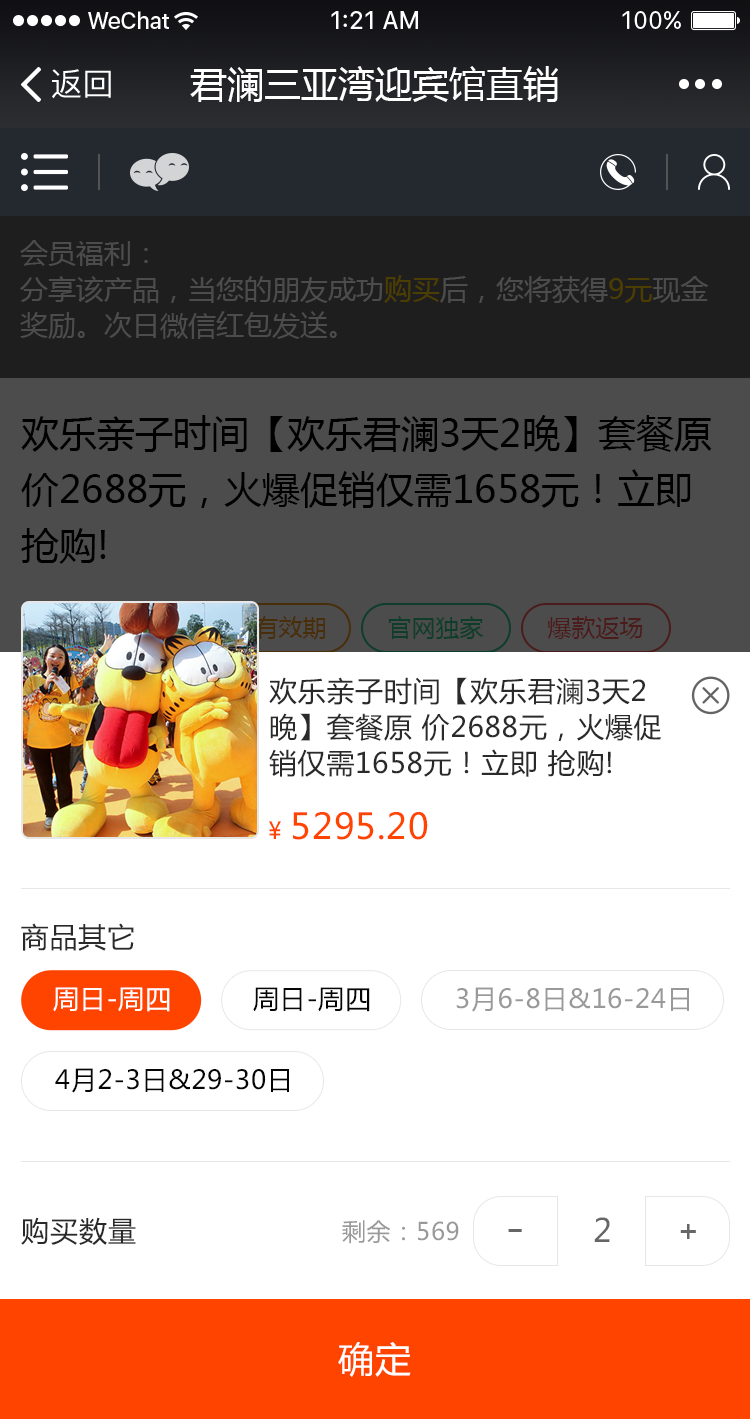
<style>
.page{position:relative;width:750px;height:1419px;background:#ffffff}
.page>*{position:absolute;margin:0}
.t1{font:32px "PingFangSC-Regular";color:#ffffff}
.t2{font:37px "MicrosoftYaHei";color:#ffffff}
.t3{font:28px/36px "MicrosoftYaHei";letter-spacing:0.025em;color:#2a2a2a}
.t4{font:35.2px "MicrosoftYaHei";letter-spacing:0.03em;color:#ff4400}
.t5{font:30.5px "MicrosoftYaHei";letter-spacing:0.03em;color:#ff4400}
.t6{font:23.5px "MicrosoftYaHei";letter-spacing:0.03em;color:#ff4400}
.t7{font:28px "MicrosoftYaHei";letter-spacing:0.03em;color:#2a2a2a}
.t8{font:26px "MicrosoftYaHei";letter-spacing:0.025em;color:#ffffff}
.t9{font:26px "MicrosoftYaHei";letter-spacing:0.025em;color:#050505}
.t10{font:26px "MicrosoftYaHei";letter-spacing:0.025em;color:#999999}
.t11{font:32px "MicrosoftYaHei";letter-spacing:0.03em;color:#666666}
.t12{font:24px "MicrosoftYaHei";letter-spacing:0.03em;color:#999999}
.t13{font:32px "ArialMT";letter-spacing:0.03em;color:#666666;scale:1.52 1}
.t14{font:32px "ArialMT";letter-spacing:0.03em;color:#666666}
.t15{font:36px "MicrosoftYaHei";letter-spacing:0.03em;color:#ffffff}
</style>
<div class="page">
<p class="t1" style="left:52px;top:69px;width:59px;height:30px">返回</p>
<p class="t2" style="left:190px;top:66px;width:368px;height:36px">君澜三亚湾迎宾馆直销</p>
<p class="t3" style="left:269px;top:677px;width:392px;height:100px">欢乐亲子时间【欢乐君澜3天2<br>晚】套餐原 价2688元，火爆促<br>销仅需1658元！立即 抢购!</p>
<p class="t4" style="left:269px;top:812px;width:159px;height:28px"><span class="t5"> </span><span class="t6">¥ </span>5295.20</p>
<p class="t7" style="left:21px;top:923px;width:113px;height:28px">商品其它</p>
<p class="t8" style="left:53px;top:987px;width:117px;height:25px">周日-周四</p>
<p class="t9" style="left:253px;top:987px;width:117px;height:25px">周日-周四</p>
<p class="t10" style="left:456px;top:987px;width:233px;height:25px">3月6-8日&amp;16-24日</p>
<p class="t9" style="left:55px;top:1068px;width:234px;height:25px">4月2-3日&amp;29-30日</p>
<p class="t7" style="left:21px;top:1217px;width:115px;height:28px">购买数量</p>
<p class="t11" style="left:594px;top:1217px;width:16px;height:25px">2</p>
<p class="t12" style="left:342px;top:1220px;width:117px;height:24px">剩余：569</p>
<p class="t13" style="left:508px;top:1229px;width:14px;height:3px">-</p>
<p class="t14" style="left:680px;top:1224px;width:16px;height:15px">+</p>
<p class="t15" style="left:338px;top:1342px;width:73px;height:35px">确定</p>
</div>
